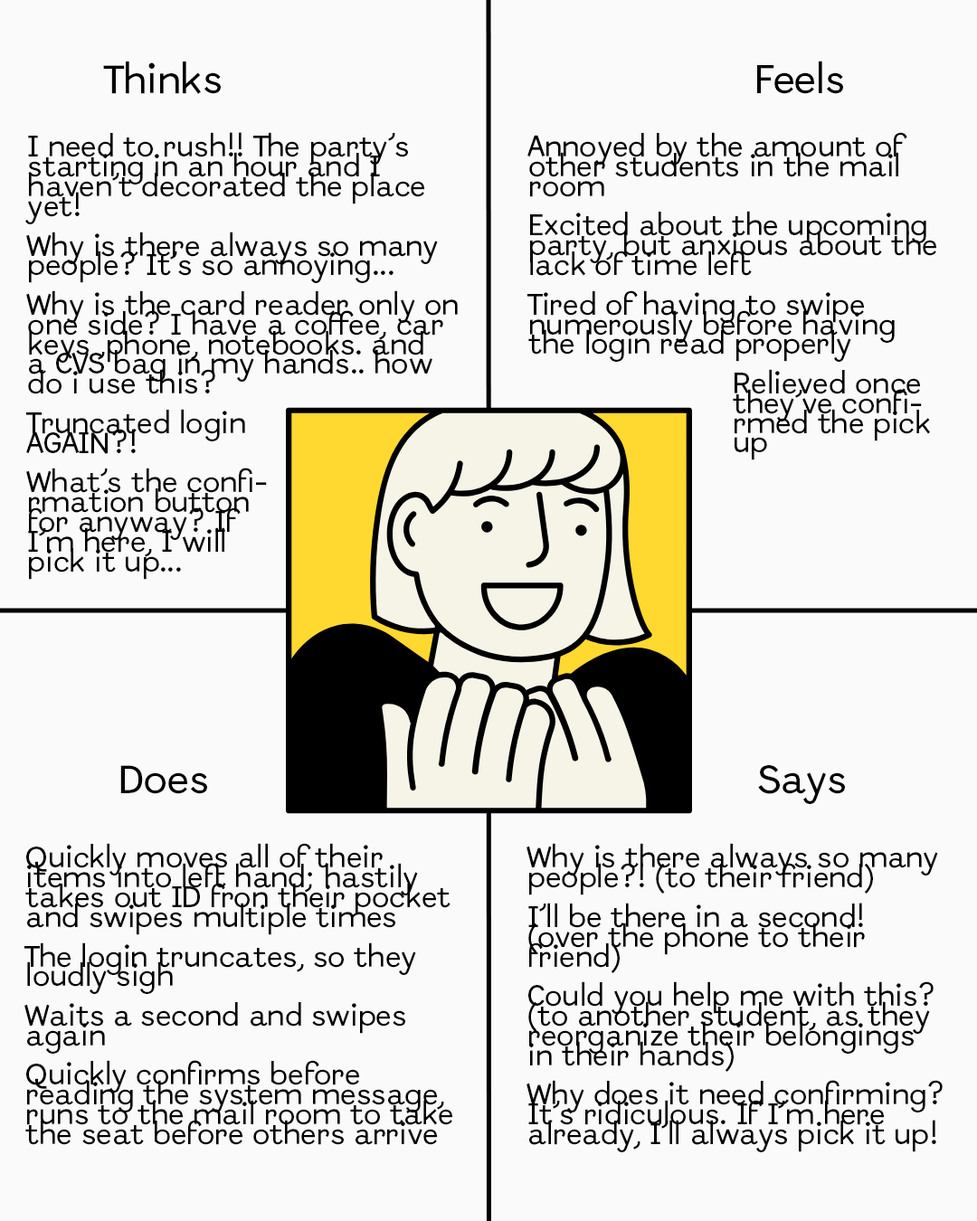
<style>
.page{position:relative;width:977px;height:1221px;background:#fafafa}
.page>*{position:absolute;margin:0}
.t1{font:39.8px "Abordage-Regular";color:#000000}
.t2{font:29.6px/19.7px "Abordage-Regular";color:#000000}
</style>
<div class="page">
<p class="t1" style="left:103px;top:61px;width:118px;height:33px">Thinks</p>
<p class="t1" style="left:757px;top:61px;width:86px;height:33px">Feels</p>
<p class="t2" style="left:25px;top:132px;width:433px;height:448px">I need to rush!! The party’s <br>starting in an hour and I <br>haven’t decorated the place<br>yet!<br><br>Why is there always so many <br>people? It’s so annoying...<br><br>Why is the card reader only on <br>one side? I have a coffee, car<br>keys ,phone, notebooks. and <br>a CVS bag in my hands.. how <br>do i use this?<br><br>Truncated login<br>AGAIN?!<br><br>What’s the confi-<br>rmation button <br>for anyway? If<br>I’m here, I will <br>pick it up...</p>
<p class="t2" style="left:527px;top:132px;width:409px;height:328px">Annoyed by the amount of <br>other students in the mail <br>room <br><br>Excited about the upcoming<br>party, but anxious about the <br>lack of time left<br><br>Tired of having to swipe<br>numerously before having<br>the login read properly <br> <br>                       Relieved once <br>                       they’ve confi-<br>                       rmed the pick <br>                       up</p>
<p class="t1" style="left:120px;top:765px;width:87px;height:29px">Does</p>
<p class="t1" style="left:758px;top:765px;width:87px;height:39px">Says</p>
<p class="t2" style="left:24px;top:843px;width:428px;height:302px">Quickly moves all of their<br>items into left hand; hastily<br>takes out ID fron their pocket<br>and swipes multiple times<br><br>The login truncates, so they<br>loudly sigh<br><br>Waits a second and swipes <br>again <br><br>Quickly confirms before <br>reading the system message, <br>runs to the mail room to take <br>the seat before others arrive</p>
<p class="t2" style="left:526px;top:843px;width:416px;height:309px">Why is there always so many<br>people?! (to their friend)<br><br>I’ll be there in a second!<br>(over the phone to their <br>friend)<br><br>Could you help me with this?<br>(to another student, as they<br>reorganize their belongings<br>in their hands)<br><br>Why does it need confirming?<br>It’s ridiculous. If I’m here <br>already, I’ll always pick it up!</p>
</div>
